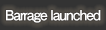
<style>
.page{position:relative;width:106px;height:30px;background:#333333}
.page>*{position:absolute;margin:0}
.t1{font:14px "FutoGoB101Pr5-Bold";letter-spacing:-0.08em;color:#ffffff}
</style>
<div class="page">
<p class="t1" style="left:6px;top:10px;width:95px;height:13px">Barrage launched</p>
</div>
